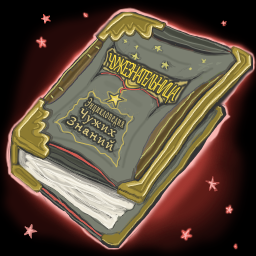
<style>
.page{position:relative;width:256px;height:256px}
.page>*{position:absolute;margin:0}
.t1{font:25px "Gabriola";letter-spacing:-0.1em;color:#ffe244;scale:0.56 1}
.t2{font:16.7px/12.5px "Gabriola";letter-spacing:0.1em;color:#decd88;scale:0.5 1}
.t3{font:16.7px/12.5px "Gabriola";letter-spacing:0.1em;color:#decd88}
</style>
<div class="page">
<p class="t1" style="left:108px;top:53px;width:73px;height:51px;rotate:27deg">ЧУЖЕЗНАТЕЛЬНИЦА</p>
<p class="t2" style="left:66px;top:98px;width:59px;height:53px;text-align:center;rotate:32deg">Энциклопедия<br><span class="t3">Чужих<br>Знаний</span></p>
</div>
